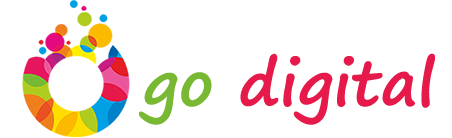
<style>
.page{position:relative;width:452px;height:138px;background:#ffffff}
.page>*{position:absolute;margin:0}
.t1{font:62.2px "SegoePrint-Bold";color:#e51a4b}
.t2{font:62.2px "SegoePrint-Bold";color:#78b833}
</style>
<div class="page">
<p class="t1" style="left:138px;top:53px;width:297px;height:72px"><span class="t2">go </span>digital</p>
</div>
